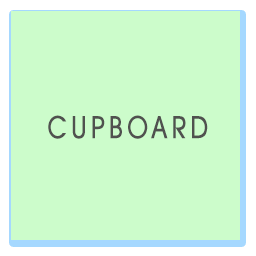
<style>
.page{position:relative;width:256px;height:256px;background:#ccfccb}
.page>*{position:absolute;margin:0}
.t1{font:30px "AvantGarde-Medium";letter-spacing:0.15em;color:#50514f;text-transform:uppercase;scale:0.84 1}
</style>
<div class="page">
<p class="t1" style="left:48px;top:115px;width:160px;height:24px">CUPBOARD</p>
</div>
